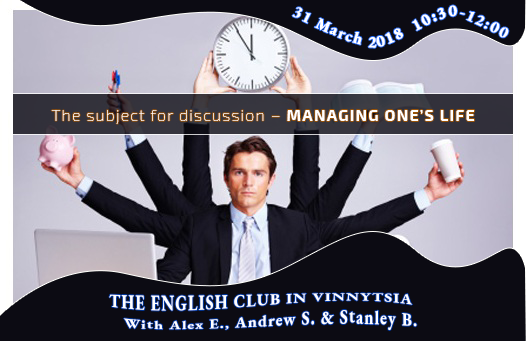
<style>
.page{position:relative;width:526px;height:341px;background:#0c0b13}
.page>*{position:absolute;margin:0}
.t1{font:16px/21px "EBGaramond-Bold";letter-spacing:0.075em;color:#ffffff;font-weight:bold}
.t2{font:16px "Exo2-Thin";letter-spacing:0.075em;color:#ffffff}
.t3{font:16px "Exo2-Bold";letter-spacing:0.075em;color:#ffffff}
.t4{font:16px/21px "EBGaramond-Bold";letter-spacing:0.075em;color:#ffffff}
</style>
<div class="page">
<p class="t1" style="left:292px;top:5px;width:217px;height:43px;text-align:center">31 March 2018  10:30-12:00</p>
<p class="t2" style="left:51px;top:110px;width:424px;height:14px">The subject for discussion – <span class="t3">MANAGING ONE’S LIFE</span></p>
<p class="t4" style="left:109px;top:293px;width:308px;height:38px;text-align:center">THE ENGLISH CLUB IN VINNYTSIA<br>    With Alex E., Andrew S. &amp; Stanley B.</p>
</div>
